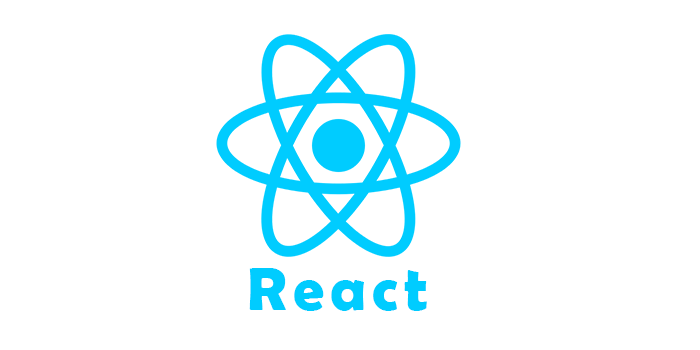
<style>
.page{position:relative;width:700px;height:350px;background:#ffffff}
.page>*{position:absolute;margin:0}
.t1{font:61.7px "BerlinSansFBDemi-Bold";letter-spacing:0.1em;color:#00ccff}
</style>
<div class="page">
<p class="t1" style="left:249px;top:268px;width:178px;height:43px">React</p>
</div>
